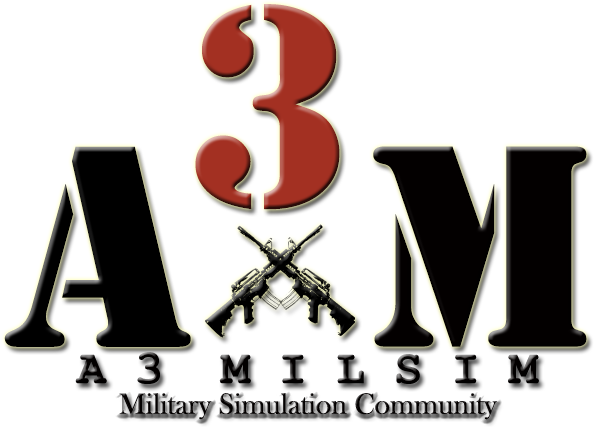
<style>
.page{position:relative;width:594px;height:427px;background:#ffffff}
.page>*{position:absolute;margin:0}
.t1{font:300px "Stencil";color:#a33022}
.t2{font:300px "Stencil";color:#000000}
.t3{font:300px "Stencil";color:#030000}
.t4{font:48px "CourierNewPS-BoldMT";color:#030000}
.t5{font:30px "BaskOldFace";color:#030000}
</style>
<div class="page">
<p class="t1" style="left:195px;top:4px;width:145px;height:206px">3</p>
<p class="t2" style="left:4px;top:146px;width:187px;height:201px">A</p>
<p class="t3" style="left:373px;top:146px;width:214px;height:201px">M</p>
<p class="t4" style="left:75px;top:352px;width:464px;height:32px">A 3  M I L S I M</p>
<p class="t5" style="left:119px;top:393px;width:378px;height:27px">Military Simulation Community</p>
</div>
